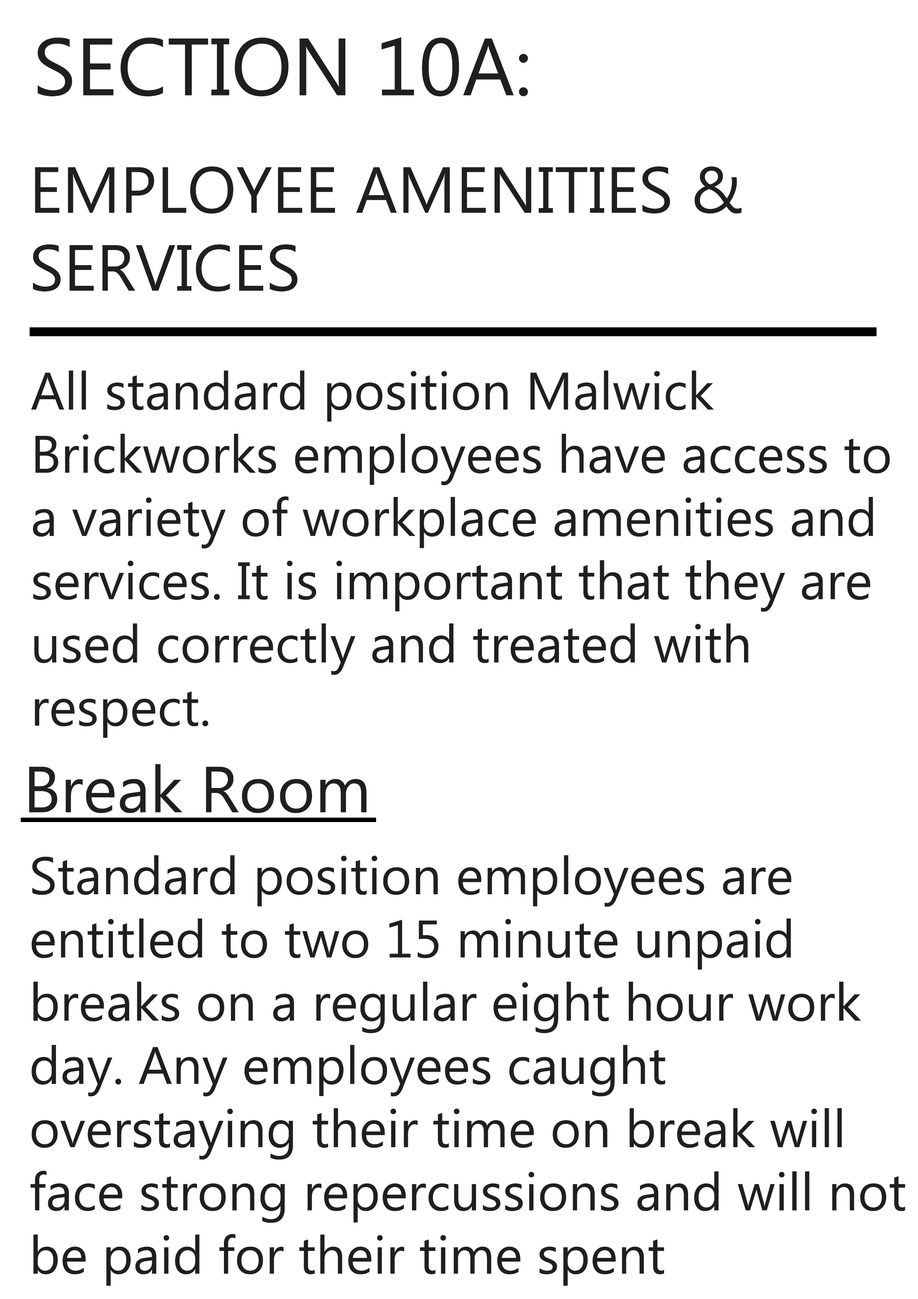
<style>
.page{position:relative;width:918px;height:1299px;background:#ffffff}
.page>*{position:absolute;margin:0}
.t1{font:81px "MicrosoftPhagsPa";color:#1f1f1f}
.t2{font:64.9px "MicrosoftPhagsPa";color:#1f1f1f}
.t3{font:52.7px "MicrosoftPhagsPa";color:#1f1f1f}
</style>
<div class="page">
<p class="t1" style="left:37px;top:37px;width:491px;height:60px">SECTION 10A:</p>
<p class="t2" style="left:33px;top:166px;width:709px;height:126px">EMPLOYEE AMENITIES &amp;<br>SERVICES</p>
<p class="t3" style="left:31px;top:370px;width:859px;height:368px">All standard position Malwick<br>Brickworks employees have access to<br>a variety of workplace amenities and<br>services. It is important that they are<br>used correctly and treated with<br>respect.</p>
<p class="t2" style="left:29px;top:764px;width:338px;height:49px">Break Room</p>
<p class="t3" style="left:30px;top:855px;width:876px;height:431px">Standard position employees are<br>entitled to two 15 minute unpaid<br>breaks on a regular eight hour work<br>day. Any employees caught<br>overstaying their time on break will<br>face strong repercussions and will not<br>be paid for their time spent</p>
</div>
